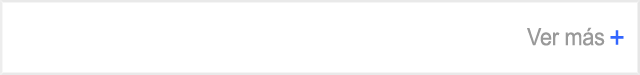
<style>
.page{position:relative;width:640px;height:75px;background:#ffffff}
.page>*{position:absolute;margin:0}
.t1{font:24px "ArialMT";letter-spacing:-0.01em;color:#999999;scale:0.9 1}
.t2{font:30px "ArialMT";letter-spacing:-0.01em;color:#3366ff;scale:0.9 1}
</style>
<div class="page">
<p class="t1" style="left:527px;top:27px;width:78px;height:19px">Ver más</p>
<p class="t2" style="left:610px;top:30px;width:14px;height:15px">+</p>
</div>
